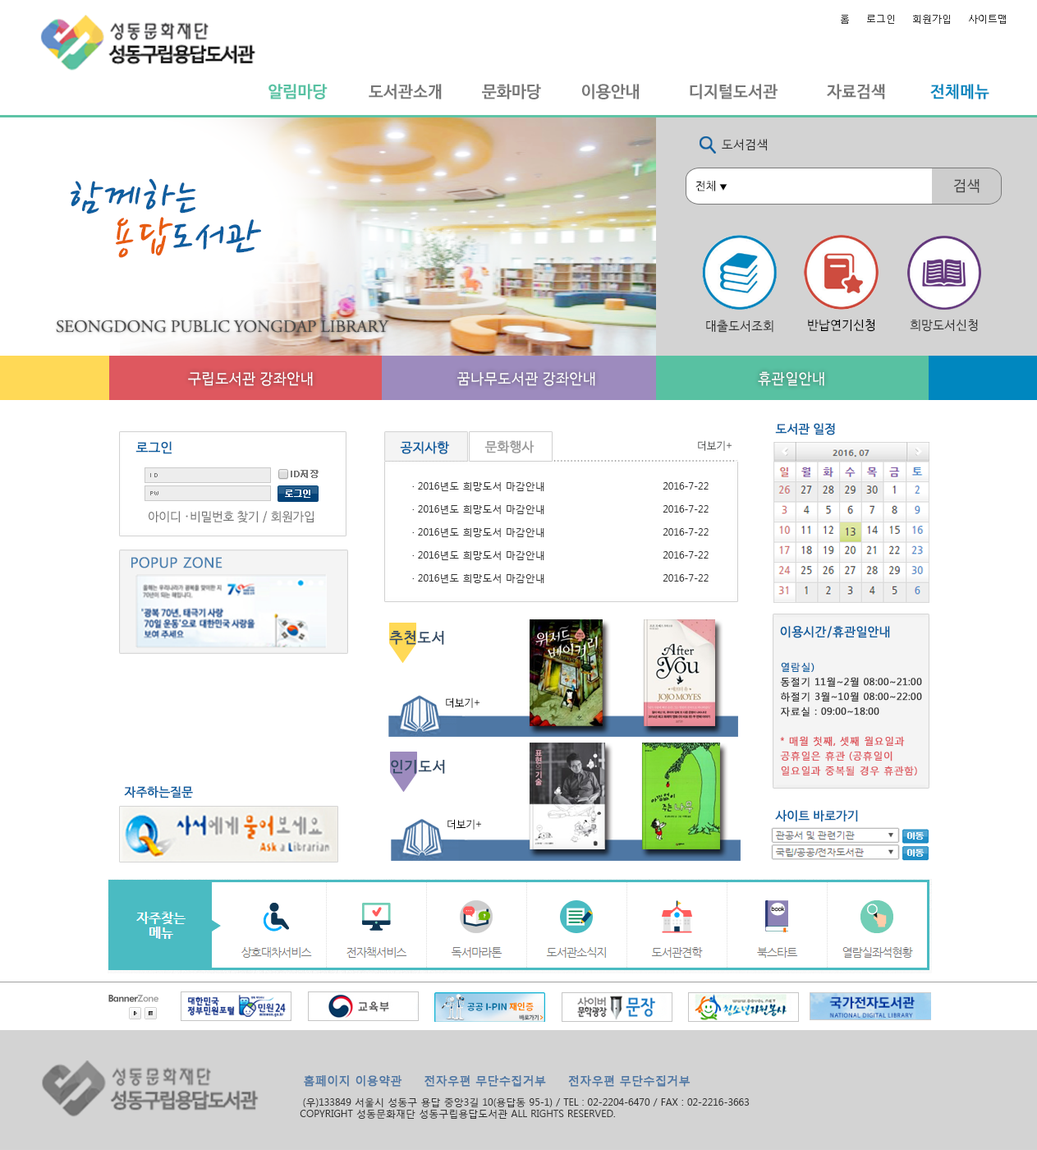
<style>
.page{position:relative;width:1037px;height:1150px;background:#ffffff}
.page>*{position:absolute;margin:0}
.t1{font:9.9px "MalgunGothicRegular";color:#333333}
.t2{font:16.4px "NanumBarunGothicBold";letter-spacing:0.01em;color:#58c1a2}
.t3{font:16.4px "NanumBarunGothicBold";letter-spacing:0.01em;color:#777777}
.t4{font:16.4px "NanumBarunGothicBold";letter-spacing:0.01em;color:#0087bf}
.t5{font:12.4px "NanumBarunGothic";letter-spacing:0.035em;color:#333333;text-transform:uppercase}
.t6{font:49.3px/39.4px "NanumPen";letter-spacing:0.025em;color:#0e5e9f;font-style:italic}
.t7{font:49.3px/39.4px "NanumPen";letter-spacing:0.025em;color:#e75c10;font-style:italic}
.t8{font:11.5px "NanumBarunGothic";letter-spacing:0.035em;color:#010101;text-transform:uppercase}
.t9{font:8.2px "NanumBarunGothic";letter-spacing:0.035em;color:#010101;text-transform:uppercase}
.t10{font:14.8px "NanumBarunGothic";letter-spacing:0.035em;color:#595959;text-transform:uppercase}
.t11{font:17.2px "AGaramondPro-Regular";letter-spacing:-0.01em;color:#454646;text-transform:uppercase}
.t12{font:12.8px "NanumBarunGothic";letter-spacing:0.035em;color:#333333;text-transform:uppercase;scale:0.97 1}
.t13{font:12.8px "NanumBarunGothic";letter-spacing:0.035em;color:#000000;text-transform:uppercase;scale:0.97 1}
.t14{font:14.8px "NanumBarunGothic";letter-spacing:0.035em;color:#ffffff;text-transform:uppercase}
.t15{font:12.3px "NanumBarunGothic";letter-spacing:0.01em;color:#0e5e9f;font-weight:bold}
.t16{font:13.1px "NanumBarunGothic";letter-spacing:0.01em;color:#0e5e9f;font-weight:bold}
.t17{font:13.1px "NanumBarunGothic";letter-spacing:0.01em;color:#999999;font-weight:bold}
.t18{font:10.7px "NanumBarunGothic";letter-spacing:0.01em;color:#4a4b4b}
.t19{font:9.9px/23px "MalgunGothicRegular";color:#333333}
.t20{font:12.3px "NanumBarunGothic";letter-spacing:0.01em;color:#777777}
.t21{font:14.3px "MalgunGothicRegular";color:#4b81b1;font-weight:bold}
.t22{font:14.8px "NanumBarunGothic";letter-spacing:0.035em;color:#304964;text-transform:uppercase;font-weight:bold}
.t23{font:9.9px/14.8px "MalgunGothicRegular";letter-spacing:0.01em;color:#333333;font-weight:bold}
.t24{font:12.3px/11.5px "NanumBarunGothic";letter-spacing:0.025em;color:#0e5e9f;font-weight:bold}
.t25{font:9.9px/11.5px "MalgunGothicRegular";letter-spacing:0.025em;color:#0e5e9f;font-weight:bold}
.t26{font:9.9px/14.8px "MalgunGothicRegular";letter-spacing:0.01em;color:#de585f;font-weight:bold}
.t27{font:10.7px "NanumBarunGothic";letter-spacing:0.01em;color:#010101}
.t28{font:11.5px "MalgunGothicRegular";color:#4e77a4;font-weight:bold}
.t29{font:9.9px/11.5px "MalgunGothicRegular";color:#333333}
.t30{font:12.3px/11.5px "NanumBarunGothic";letter-spacing:0.01em;color:#000000}
</style>
<div class="page">
<p class="t1" style="left:841px;top:15px;width:165px;height:9px">홈     로그인     회원가입     사이트맵</p>
<p class="t2" style="left:269px;top:84px;width:59px;height:15px">알림마당</p>
<p class="t2" style="left:269px;top:84px;width:59px;height:15px">알림마당</p>
<p class="t3" style="left:369px;top:84px;width:73px;height:15px">도서관소개</p>
<p class="t3" style="left:482px;top:84px;width:59px;height:15px">문화마당</p>
<p class="t3" style="left:482px;top:84px;width:59px;height:15px">문화마당</p>
<p class="t3" style="left:582px;top:84px;width:57px;height:15px">이용안내</p>
<p class="t3" style="left:582px;top:84px;width:57px;height:15px">이용안내</p>
<p class="t3" style="left:690px;top:84px;width:88px;height:15px">디지털도서관</p>
<p class="t3" style="left:690px;top:84px;width:88px;height:15px">디지털도서관</p>
<p class="t3" style="left:827px;top:84px;width:58px;height:15px">자료검색</p>
<p class="t3" style="left:827px;top:84px;width:58px;height:15px">자료검색</p>
<p class="t4" style="left:930px;top:84px;width:60px;height:15px">전체메뉴</p>
<p class="t5" style="left:722px;top:139px;width:45px;height:12px">도서검색</p>
<p class="t6" style="left:71px;top:178px;width:190px;height:80px">함께하는<br><span class="t7">   용답</span>도서관</p>
<p class="t8" style="left:696px;top:181px;width:32px;height:10px">전체 <span class="t9">▼</span></p>
<p class="t10" style="left:953px;top:179px;width:27px;height:14px">검색</p>
<p class="t11" style="left:56px;top:320px;width:333px;height:13px">seongdong public yongdap library</p>
<p class="t12" style="left:706px;top:319px;width:68px;height:14px">대출도서조회</p>
<p class="t13" style="left:808px;top:319px;width:67px;height:13px">반납연기신청</p>
<p class="t12" style="left:910px;top:319px;width:68px;height:13px">희망도서신청</p>
<p class="t14" style="left:188px;top:371px;width:125px;height:15px">구립도서관 강좌안내</p>
<p class="t14" style="left:457px;top:371px;width:138px;height:15px">꿈나무도서관 강좌안내</p>
<p class="t14" style="left:758px;top:371px;width:66px;height:15px">휴관일안내</p>
<p class="t15" style="left:775px;top:423px;width:60px;height:12px">도서관 일정</p>
<p class="t16" style="left:135px;top:441px;width:37px;height:13px">로그인</p>
<p class="t16" style="left:400px;top:441px;width:49px;height:13px">공지사항</p>
<p class="t17" style="left:485px;top:440px;width:50px;height:13px">문화행사</p>
<p class="t18" style="left:698px;top:440px;width:34px;height:11px">더보기+</p>
<p class="t19" style="left:412px;top:482px;width:297px;height:101px">· 2016년도 희망도서 마감안내                                  2016-7-22<br>· 2016년도 희망도서 마감안내                                  2016-7-22<br>· 2016년도 희망도서 마감안내                                  2016-7-22<br>· 2016년도 희망도서 마감안내                                  2016-7-22<br>· 2016년도 희망도서 마감안내                                  2016-7-22</p>
<p class="t20" style="left:149px;top:511px;width:165px;height:12px">아이디 ·비밀번호 찾기 / 회원가입</p>
<p class="t21" style="left:131px;top:557px;width:92px;height:11px">POPUP ZONE</p>
<p class="t22" style="left:389px;top:630px;width:55px;height:15px">추천도서</p>
<p class="t23" style="left:780px;top:626px;width:142px;height:150px"><span class="t24">이용시간/휴관일안내<br></span><span class="t25"><br><br>열람실)<br></span>동절기 11월~2월 08:00~21:00<br>하절기 3월~10월 08:00~22:00<br>자료실 : 09:00~18:00<br><br><span class="t26">* 매월 첫째, 셋째 월요일과 공휴일은 휴관 (공휴일이 일요일과 중복될 경우 휴관함)</span></p>
<p class="t27" style="left:446px;top:697px;width:34px;height:11px">더보기+</p>
<p class="t22" style="left:391px;top:760px;width:54px;height:14px">인기도서</p>
<p class="t15" style="left:124px;top:786px;width:69px;height:12px">자주하는질문</p>
<p class="t15" style="left:775px;top:810px;width:83px;height:12px">사이트 바로가기</p>
<p class="t27" style="left:448px;top:819px;width:33px;height:10px">더보기+</p>
<p class="t28" style="left:304px;top:1075px;width:387px;height:11px">홈페이지 이용약관     전자우편 무단수집거부     전자우편 무단수집거부</p>
<p class="t29" style="left:300px;top:1097px;width:450px;height:21px"><span class="t30"> </span>(우)133849 서울시 성동구 용답 중앙3길 10(용답동 95-1) / TEL : 02-2204-6470 / FAX : 02-2216-3663<br>COPYRIGHT 성동문화재단 성동구립용답도서관 ALL RIGHTS RESERVED.</p>
</div>
